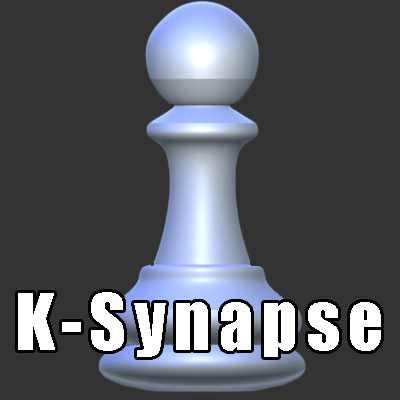
<style>
.page{position:relative;width:400px;height:400px;background:#333333}
.page>*{position:absolute;margin:0}
.t1{font:72px "Impact";letter-spacing:0.1em;color:#ffffff}
</style>
<div class="page">
<p class="t1" style="left:18px;top:292px;width:363px;height:65px">K-Synapse</p>
</div>
